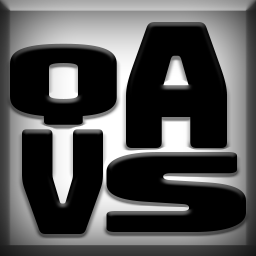
<style>
.page{position:relative;width:256px;height:256px;background:#000000}
.page>*{position:absolute;margin:0}
.t1{font:175.4px "Bungee-Regular";color:#000000;scale:0.93 1}
.t2{font:98.3px "Bungee-Regular";color:#000000;scale:1.74 1}
.t3{font:145.3px "Bungee-Regular";color:#000000;scale:0.9 1}
.t4{font:111px "Bungee-Regular";color:#000000;scale:2.25 1}
</style>
<div class="page">
<p class="t1" style="left:126px;top:22px;width:101px;height:126px">a</p>
<p class="t2" style="left:10px;top:43px;width:107px;height:82px">Q</p>
<p class="t3" style="left:22px;top:129px;width:81px;height:105px">V</p>
<p class="t4" style="left:106px;top:152px;width:140px;height:80px">s</p>
</div>
